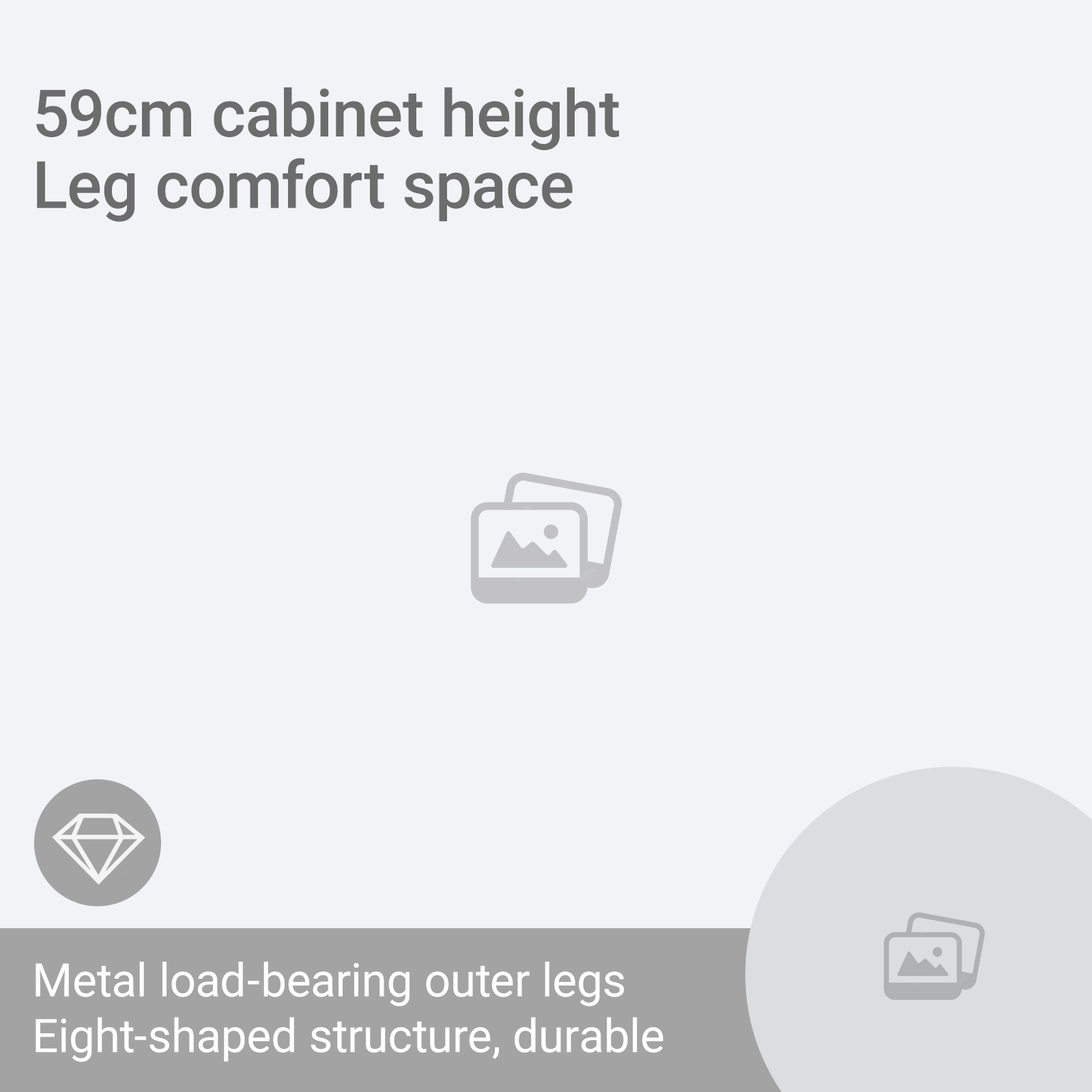
<style>
.page{position:relative;width:1092px;height:1092px;background:#f2f3f6}
.page>*{position:absolute;margin:0}
.t1{font:65.5px/71.3px "Roboto-Medium";color:#6c6c6c}
.t2{font:46.4px "Roboto-Regular";color:#ffffff}
</style>
<div class="page">
<p class="t1" style="left:36px;top:87px;width:583px;height:135px">59cm cabinet height<br>Leg comfort space</p>
<p class="t2" style="left:35px;top:962px;width:628px;height:100px">Metal load-bearing outer legs<br>Eight-shaped structure, durable</p>
</div>
